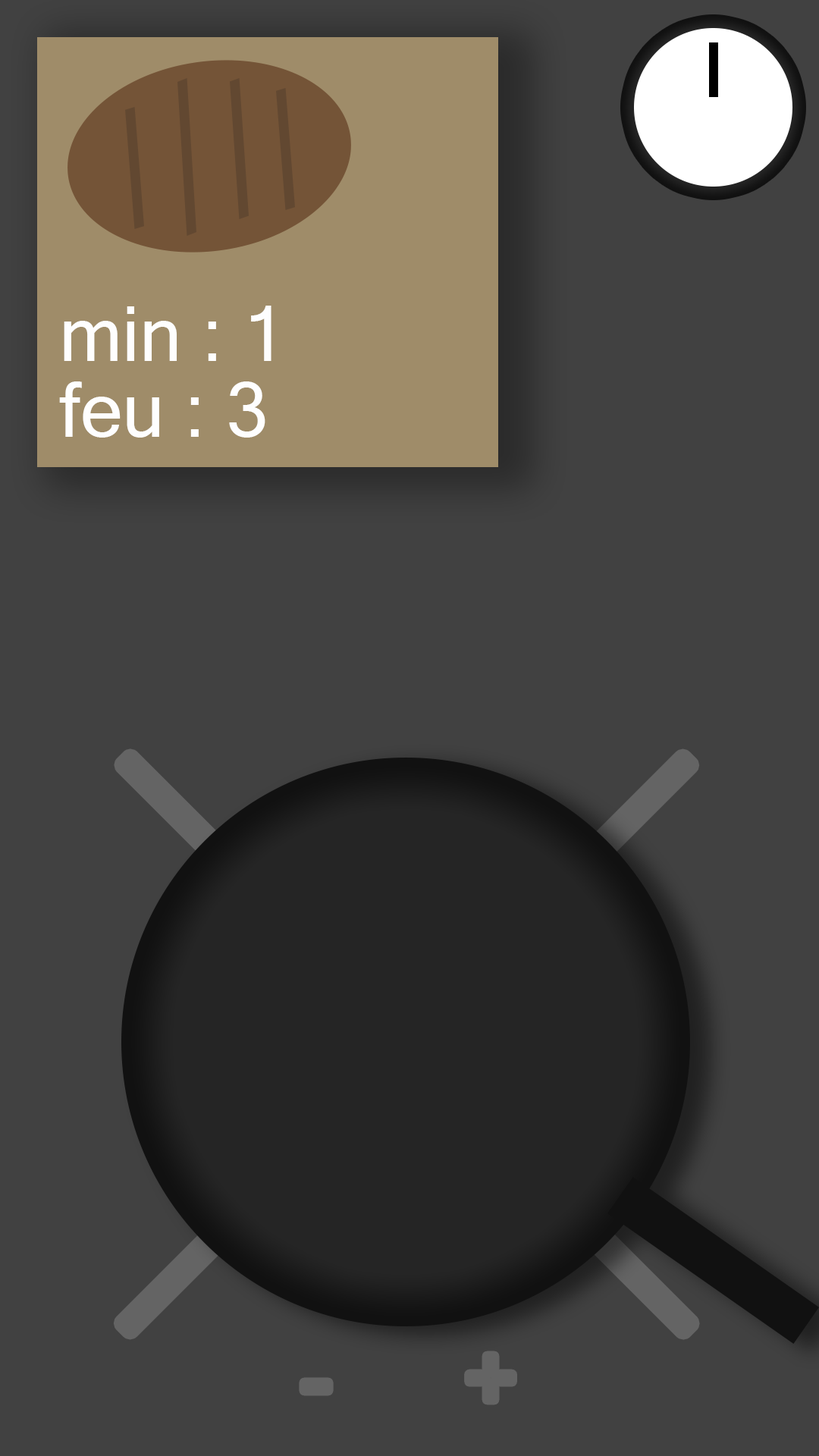
<style>
.page{position:relative;width:819px;height:1456px;background:#414141}
.page>*{position:absolute;margin:0}
.t1{font:75.8px/75.8px "MicrosoftSansSerif";color:#fefefe}
.t2{font:91px "MicrosoftSansSerif";color:#616161}
</style>
<div class="page">
<p class="t1" style="left:59px;top:306px;width:212px;height:132px">min : 1<br>feu : 3</p>
<p class="t2" style="left:303px;top:1356px;width:210px;height:44px">-      +</p>
</div>
